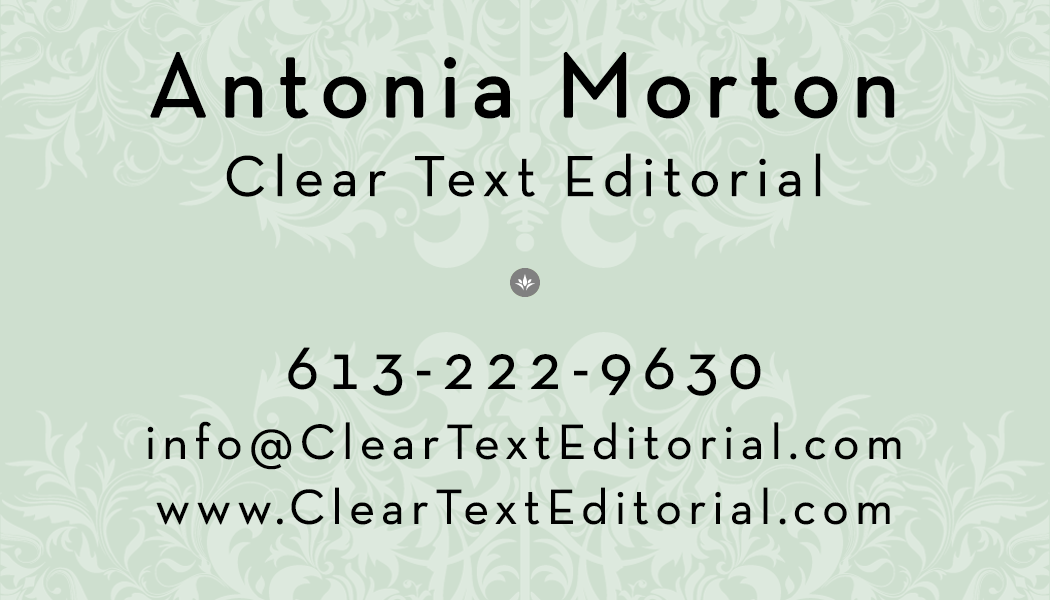
<style>
.page{position:relative;width:1050px;height:600px;background:#cedfcf}
.page>*{position:absolute;margin:0}
.t1{font:91.7px "NeutraTextTF-Book";letter-spacing:0.1em;color:#000000;font-weight:bold}
.t2{font:58.3px "NeutraTextTF-Book";letter-spacing:0.1em;color:#000000;font-weight:bold}
.t3{font:66.7px "NeutraTextTF-Book";letter-spacing:0.1em;color:#000000;font-weight:bold}
.t4{font:50px "NeutraTextTF-Book";letter-spacing:0.1em;color:#000000;font-weight:bold}
.t5{font:12px "NeutraTextTF-Book";letter-spacing:0.1em;color:#000000;font-weight:bold}
</style>
<div class="page">
<p class="t1" style="left:150px;top:52px;width:745px;height:67px">Antonia Morton</p>
<p class="t2" style="left:226px;top:153px;width:595px;height:44px">Clear Text Editorial</p>
<p class="t3" style="left:288px;top:347px;width:473px;height:49px">613-222-9630</p>
<p class="t4" style="left:147px;top:421px;width:754px;height:49px">info@ClearTextEditorial.com</p>
<p class="t5" style="left:156px;top:487px;width:734px;height:38px;text-align:center">www.ClearTextEditorial.com</p>
</div>
